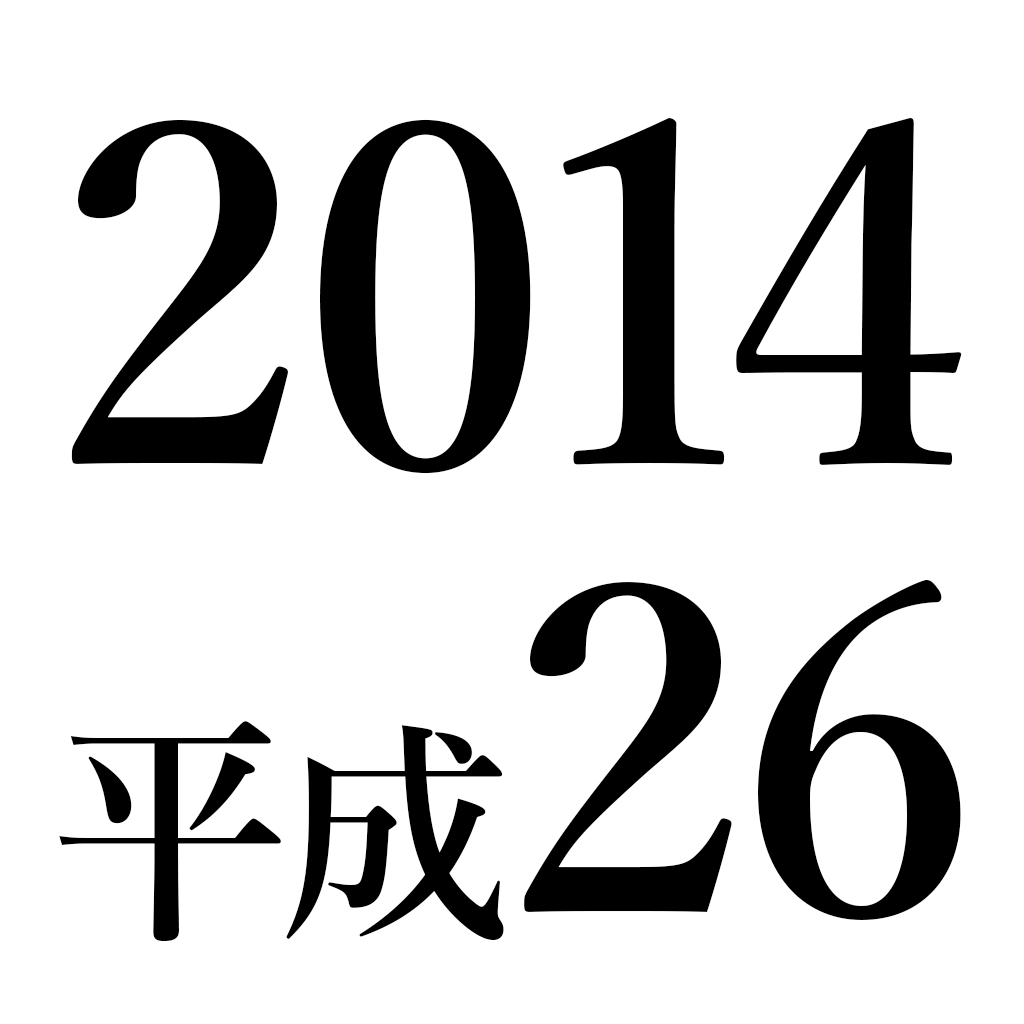
<style>
.page{position:relative;width:1024px;height:1024px;background:#ffffff}
.page>*{position:absolute;margin:0}
.t1{font:472.1px "YuMin-Demibold";letter-spacing:-0.01em;color:#000000}
.t2{font:239.6px "YuMin-Demibold";letter-spacing:-0.01em;color:#000000}
.t3{font:452.8px "YuMin-Demibold";letter-spacing:-0.01em;color:#000000}
</style>
<div class="page">
<p class="t1" style="left:71px;top:118px;width:891px;height:356px">2014</p>
<p class="t2" style="left:59px;top:580px;width:902px;height:362px">平成<span class="t3">26</span></p>
</div>
